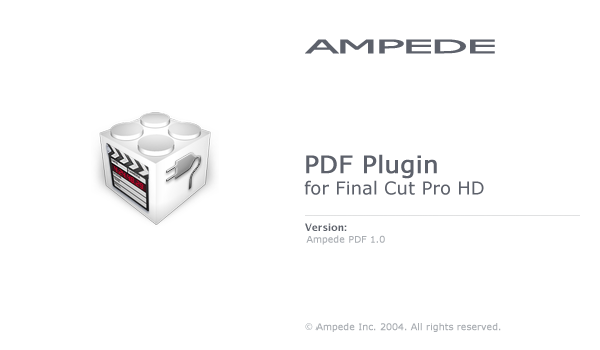
<style>
.page{position:relative;width:600px;height:350px;background:#ffffff}
.page>*{position:absolute;margin:0}
.t1{font:18.2px "Verdana";letter-spacing:-0.18em;color:#5d616b;font-weight:bold;scale:2.72 1}
.t2{font:18px "Verdana";color:#5d616b}
.t3{font:24px "Verdana";color:#5d616b;font-weight:bold}
.t4{font:9px "Verdana";color:#aaaeb3;font-weight:bold}
</style>
<div class="page">
<p class="t1" style="left:305px;top:39px;width:190px;height:15px">AMPEDE</p>
<p class="t2" style="left:304px;top:154px;width:180px;height:41px"><span class="t3">PDF Plugin<br></span>for Final Cut Pro HD</p>
<p class="t4" style="left:306px;top:235px;width:79px;height:10px">Ampede PDF 1.0</p>
<p class="t4" style="left:316px;top:323px;width:185px;height:9px">Ampede Inc. 2004. All rights reserved.</p>
</div>
